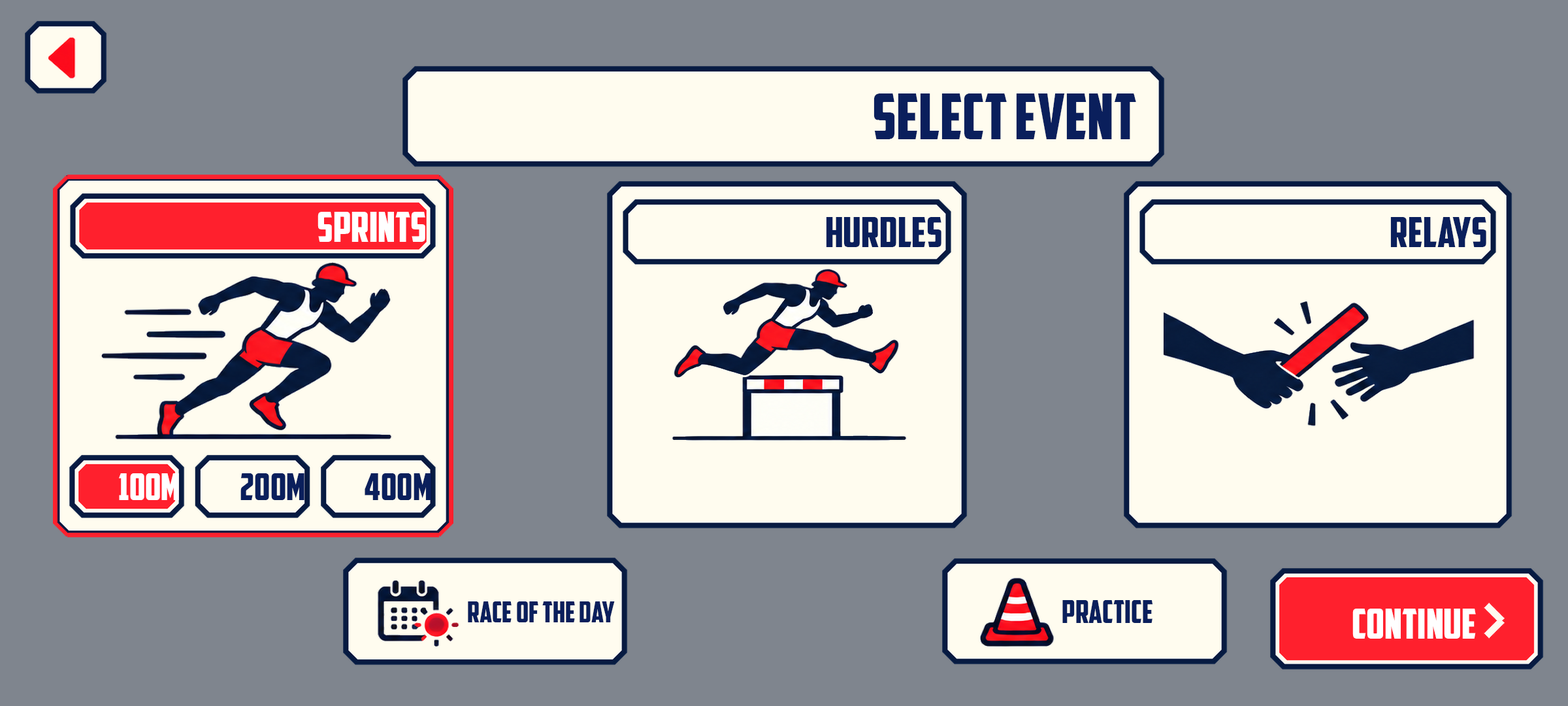
<style>
.page{position:relative;width:1568px;height:706px;background:#7f858e}
.page>*{position:absolute;margin:0}
.t1{font:62.7px "AmericanCaptain";color:#0a1f5c}
.t2{font:41.8px "AmericanCaptain";color:#ffffff}
.t3{font:41.8px "AmericanCaptain";color:#0a1f5c}
.t4{font:36.6px "AmericanCaptain";color:#ffffff}
.t5{font:36.6px "AmericanCaptain";color:#0a1f5c}
.t6{font:28.8px "AmericanCaptain";color:#0a1f5c}
.t7{font:31.4px "AmericanCaptain";color:#0a1f5c}
</style>
<div class="page">
<p class="t1" style="left:874px;top:93px;width:262px;height:46px">SELECT EVENT</p>
<p class="t2" style="left:318px;top:212px;width:107px;height:30px">SPRINTS</p>
<p class="t3" style="left:826px;top:217px;width:115px;height:30px">HURDLES</p>
<p class="t3" style="left:1390px;top:217px;width:96px;height:30px">RELAYS</p>
<p class="t4" style="left:119px;top:473px;width:60px;height:27px">100m</p>
<p class="t5" style="left:240px;top:473px;width:64px;height:27px">200m</p>
<p class="t5" style="left:365px;top:473px;width:66px;height:27px">400m</p>
<p class="t6" style="left:468px;top:601px;width:147px;height:21px">RACE OF THE DAY</p>
<p class="t7" style="left:1062px;top:600px;width:91px;height:23px">PRACTICE</p>
<p class="t2" style="left:1352px;top:608px;width:124px;height:30px">CONTINUE</p>
</div>
